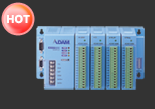
<style>
.page{position:relative;width:155px;height:109px;background:#333333}
.page>*{position:absolute;margin:0}
.t1{font:10.7px "Arial-BoldMT";color:#ffffff;font-weight:bold}
</style>
<div class="page">
<p class="t1" style="left:7px;top:14px;width:23px;height:10px">HOT</p>
</div>
